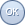
<style>
.page{position:relative;width:25px;height:25px}
.page>*{position:absolute;margin:0}
.t1{font:8.7px "Helvetica";color:#ffffff}
.t2{font:8.7px "Helvetica"}
</style>
<div class="page">
<p class="t1" style="left:5px;top:8px;width:14px;height:7px">OK</p>
<p class="t2" style="left:6px;top:9px;width:13px;height:7px">OK</p>
</div>
